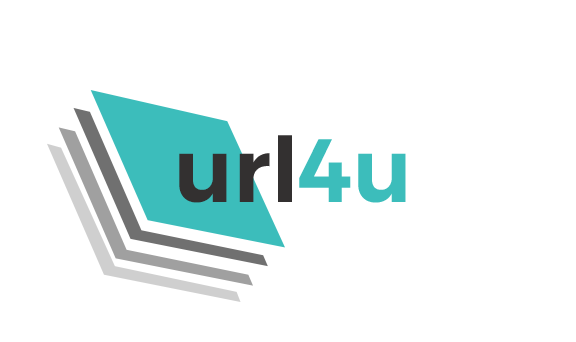
<style>
.page{position:relative;width:576px;height:342px;background:#ffffff}
.page>*{position:absolute;margin:0}
.t1{font:89.8px "Montserrat-SemiBold";color:#333030}
.t2{font:89.8px "Montserrat-SemiBold";color:#3cbdbb}
</style>
<div class="page">
<p class="t1" style="left:179px;top:135px;width:227px;height:68px">url<span class="t2">4u</span></p>
</div>
